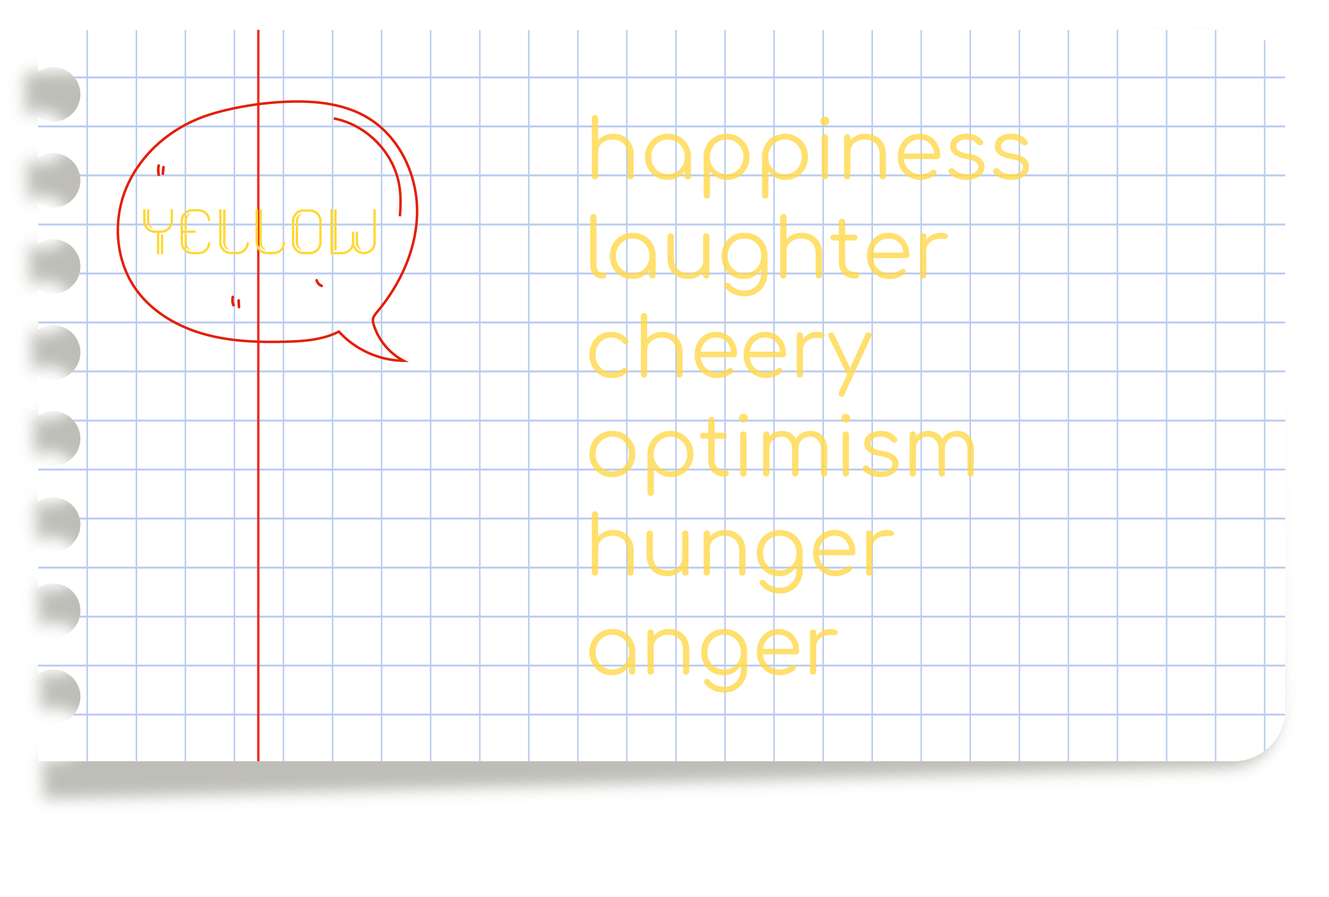
<style>
.page{position:relative;width:1329px;height:897px;background:#ffffff}
.page>*{position:absolute;margin:0}
.t1{font:82.6px "Comfortaa-Regular";color:#ffe06e}
.t2{font:64.2px "Dupleto-Regular";color:#ffd833}
</style>
<div class="page">
<p class="t1" style="left:589px;top:115px;width:440px;height:578px">happiness<br>laughter<br>cheery<br>optimism<br>hunger<br>anger</p>
<p class="t2" style="left:143px;top:209px;width:233px;height:46px">yellow</p>
</div>
